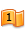
<style>
.page{position:relative;width:25px;height:30px;background:#ffffff}
.page>*{position:absolute;margin:0}
.t1{font:11px "Tahoma";color:#000000}
</style>
<div class="page">
<p class="t1" style="left:7px;top:13px;width:5px;height:8px">1</p>
</div>
